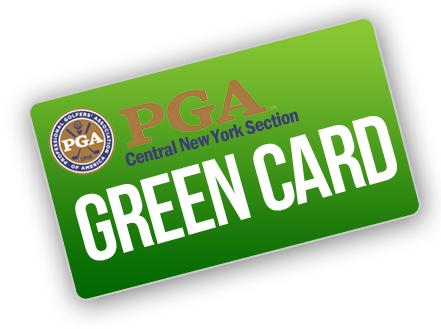
<style>
.page{position:relative;width:441px;height:329px;background:#ffffff}
.page>*{position:absolute;margin:0}
.t1{font:20px "FranklinGothic-DemiCond";letter-spacing:-0.025em;color:#393d74}
.t2{font:94.4px "BebasNeue";letter-spacing:-0.025em;color:#ffffff}
</style>
<div class="page">
<p class="t1" style="left:125px;top:111px;width:174px;height:55px;rotate:-15deg">Central New York Section</p>
<p class="t2" style="left:75px;top:116px;width:322px;height:145px;rotate:-16deg">green card</p>
</div>
